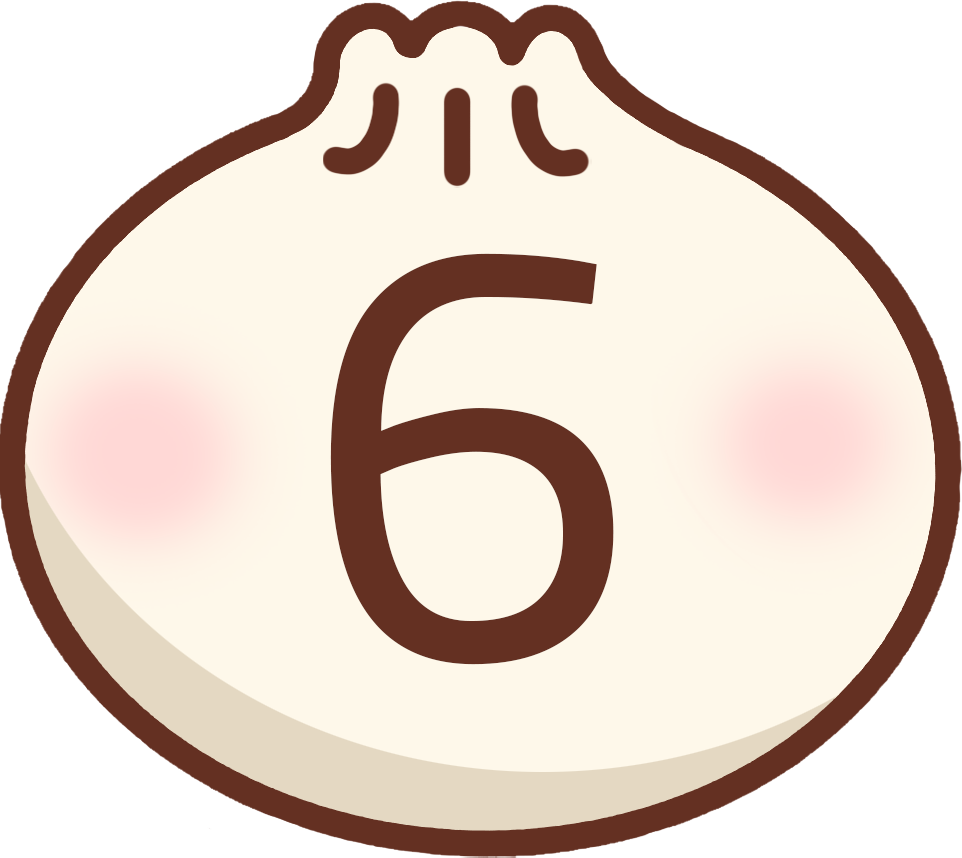
<style>
.page{position:relative;width:962px;height:858px;background:#fef8ea}
.page>*{position:absolute;margin:0}
.t1{font:600px "TitilliumWeb-Regular";letter-spacing:0.01em;color:#643022;font-weight:bold}
</style>
<div class="page">
<p class="t1" style="left:330px;top:253px;width:284px;height:412px">6</p>
</div>
